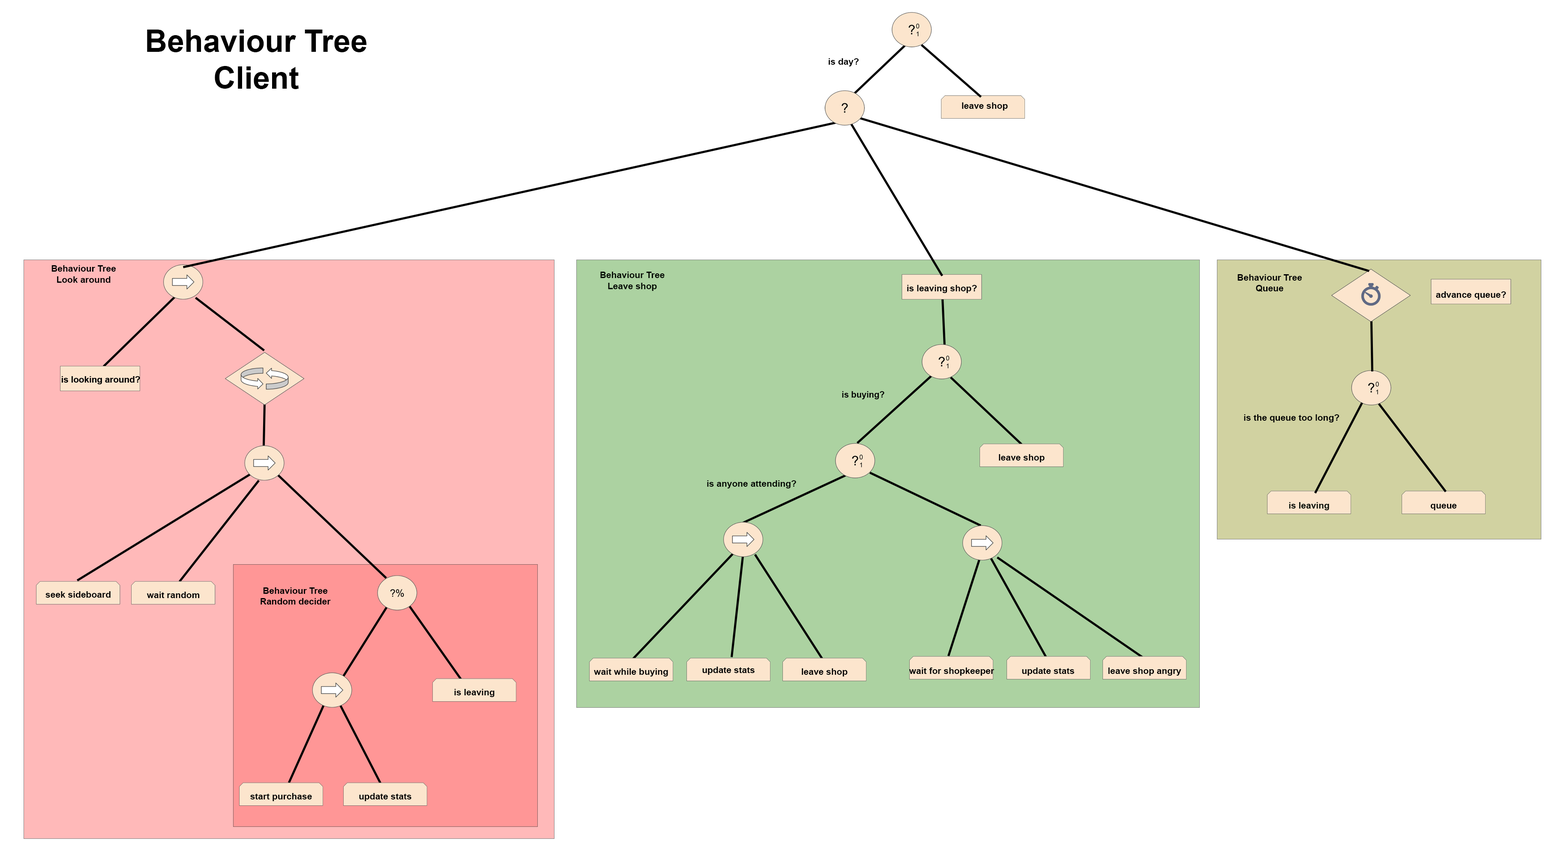
<style>
.page{position:relative;width:1564px;height:856px;background:#ffffff}
.page>*{position:absolute;margin:0}
.t1{font:30.9px "Arial-BoldMT";color:#000000}
.t2{font:9px "Arial-BoldMT";color:#000000}
.t3{font:9px "Arial-BoldMT";color:#010901}
.t4{font:8.6px "Arial-BoldMT";color:#000000}
</style>
<div class="page">
<p class="t1" style="left:147px;top:30px;width:220px;height:59px;text-align:center">Behaviour Tree <br>Client</p>
<p class="t2" style="left:829px;top:58px;width:30px;height:8px">is day?</p>
<p class="t2" style="left:962px;top:102px;width:46px;height:9px">leave shop</p>
<p class="t2" style="left:51px;top:265px;width:65px;height:18px;text-align:center">Behaviour Tree<br>Look around</p>
<p class="t3" style="left:600px;top:272px;width:65px;height:19px;text-align:center">Behaviour Tree<br>Leave shop</p>
<p class="t2" style="left:1238px;top:274px;width:64px;height:18px;text-align:center">Behaviour Tree<br>Queue</p>
<p class="t2" style="left:907px;top:285px;width:70px;height:8px">is leaving shop?</p>
<p class="t2" style="left:1436px;top:291px;width:70px;height:9px">advance queue?</p>
<p class="t4" style="left:842px;top:391px;width:43px;height:8px">is buying?</p>
<p class="t2" style="left:1244px;top:414px;width:96px;height:9px">is the queue too long?</p>
<p class="t2" style="left:999px;top:454px;width:46px;height:8px">leave shop</p>
<p class="t3" style="left:707px;top:480px;width:89px;height:9px">is anyone attending?</p>
<p class="t3" style="left:1289px;top:502px;width:40px;height:8px">is leaving</p>
<p class="t2" style="left:1431px;top:504px;width:26px;height:6px">queue</p>
<p class="t2" style="left:45px;top:591px;width:66px;height:7px">seek sideboard</p>
<p class="t2" style="left:147px;top:592px;width:53px;height:6px">wait random</p>
<p class="t2" style="left:261px;top:588px;width:70px;height:17px;text-align:center">Behaviour Tree<br>Random decider</p>
<p class="t2" style="left:594px;top:669px;width:74px;height:8px">wait while buying</p>
<p class="t2" style="left:702px;top:667px;width:53px;height:8px">update stats</p>
<p class="t2" style="left:802px;top:669px;width:46px;height:8px">leave shop</p>
<p class="t2" style="left:909px;top:668px;width:86px;height:8px">wait for shopkeeper</p>
<p class="t2" style="left:1022px;top:668px;width:52px;height:8px">update stats</p>
<p class="t2" style="left:1108px;top:668px;width:74px;height:8px">leave shop angry</p>
<p class="t2" style="left:454px;top:689px;width:41px;height:8px">is leaving</p>
<p class="t2" style="left:250px;top:793px;width:62px;height:8px">start purchase</p>
<p class="t2" style="left:359px;top:793px;width:52px;height:8px">update stats</p>
</div>
